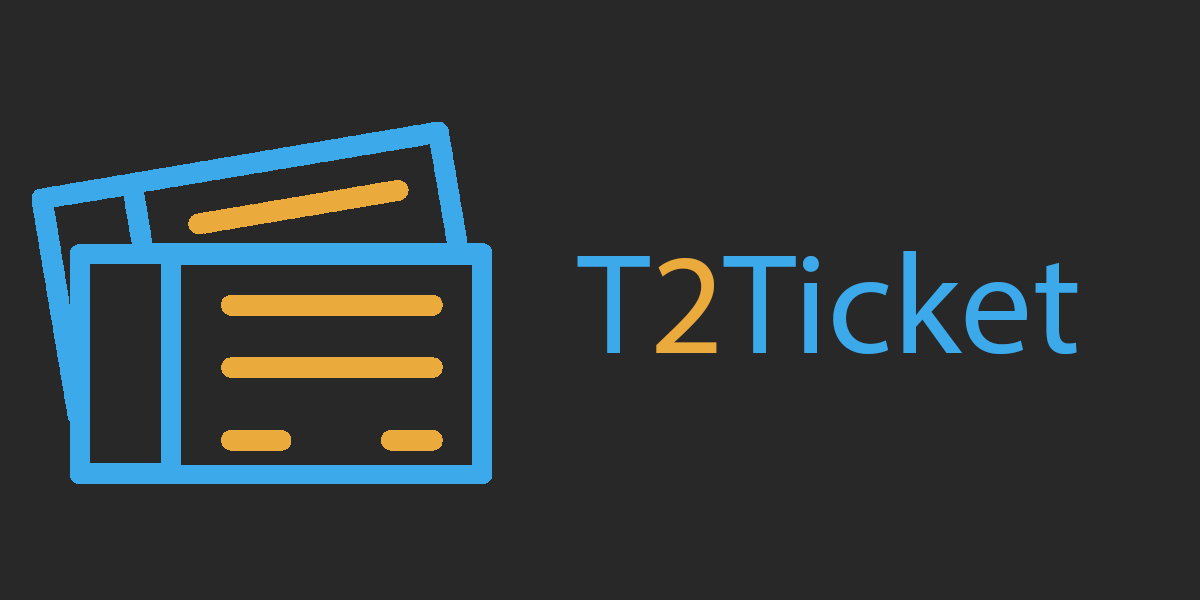
<style>
.page{position:relative;width:1200px;height:600px;background:#282828}
.page>*{position:absolute;margin:0}
.t1{font:144.4px "MyriadPro-Regular";color:#3caaea}
.t2{font:144.4px "MyriadPro-Regular";color:#eaaa3c}
</style>
<div class="page">
<p class="t1" style="left:577px;top:251px;width:501px;height:104px">T<span class="t2">2</span>Ticket</p>
</div>
